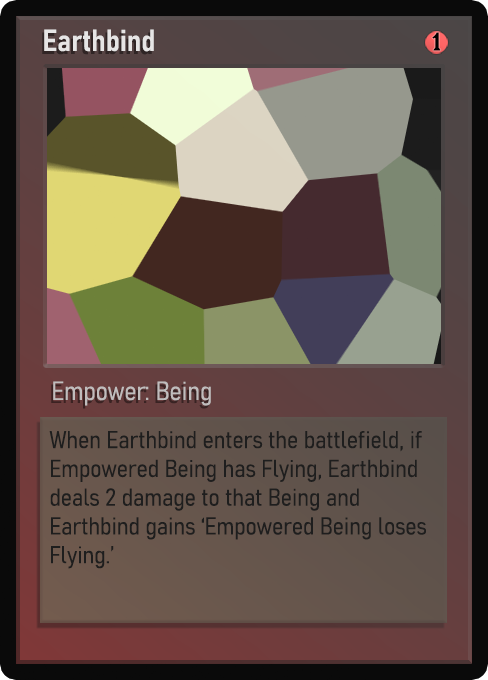
<style>
.page{position:relative;width:488px;height:680px}
.page>*{position:absolute;margin:0}
.t1{font:30px "Bahnschrift-SemiBoldSemiCondensed";color:#f2f2f2;font-weight:bold}
.t2{font:25px "WTRRoycroft";color:#000000;font-weight:bold;scale:1.09 1}
.t3{font:26px "Bahnschrift-LightSemiCondensed";color:#c8c8c8;font-weight:bold}
.t4{font:24px "Bahnschrift-LightSemiCondensed";color:#1e1e1e;font-weight:bold}
</style>
<div class="page">
<p class="t1" style="left:44px;top:29px;width:110px;height:23px;opacity:0.9">Earthbind</p>
<p class="t2" style="left:432px;top:32px;width:9px;height:19px">1</p>
<p class="t3" style="left:53px;top:381px;width:158px;height:25px;opacity:0.9">Empower: Being</p>
<p class="t4" style="left:49px;top:431px;width:377px;height:138px">When Earthbind enters the battlefield, if Empowered Being has Flying, Earthbind deals 2 damage to that Being and Earthbind gains ‘Empowered Being loses Flying.’</p>
</div>
